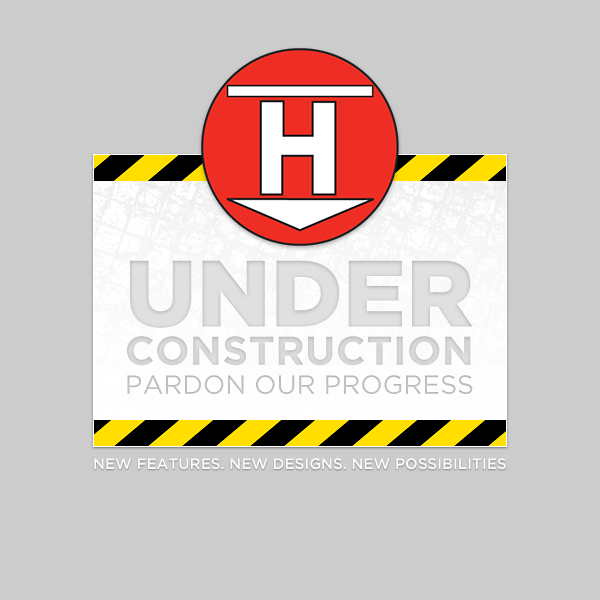
<style>
.page{position:relative;width:600px;height:600px;background:#cccccc}
.page>*{position:absolute;margin:0}
.t1{font:26px/29px "GothamBook";letter-spacing:0.01em;color:#e0e0e0;text-transform:uppercase}
.t2{font:94px "GothamBlack";letter-spacing:0.004em;color:#e0e0e0;text-transform:uppercase}
.t3{font:40px/38px "GothamBold";letter-spacing:0.019em;color:#e0e0e0;text-transform:uppercase}
.t4{font:15px "GothamMedium";letter-spacing:0.006em;color:#fbfbfb;text-transform:uppercase}
</style>
<div class="page">
<p class="t1" style="left:127px;top:260px;width:346px;height:134px"><span class="t2">Under<br></span><span class="t3">Construction<br></span>Pardon our progress</p>
<p class="t4" style="left:94px;top:458px;width:412px;height:12px">New features. New Designs. New Possibilities</p>
</div>
